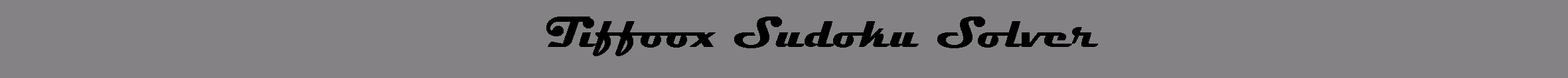
<style>
.page{position:relative;width:1568px;height:78px;background:#848284}
.page>*{position:absolute;margin:0}
.t1{font:44.7px "Magneto-Bold";color:#000000}
</style>
<div class="page">
<p class="t1" style="left:546px;top:17px;width:552px;height:39px">Tiffoox Sudoku Solver</p>
</div>
